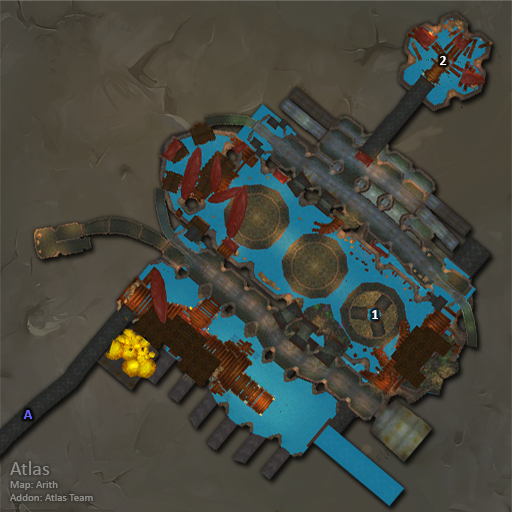
<style>
.page{position:relative;width:512px;height:512px}
.page>*{position:absolute;margin:0}
.t1{font:14px "Calibri-Bold";color:#ffffff}
.t2{font:14px "Calibri-Bold";color:#6666ff}
.t3{font:11px "Calibri";color:#91908d}
.t4{font:20px "Calibri";color:#91908d}
</style>
<div class="page">
<p class="t1" style="left:440px;top:56px;width:7px;height:9px">2</p>
<p class="t1" style="left:372px;top:310px;width:6px;height:9px">1</p>
<p class="t2" style="left:23px;top:410px;width:9px;height:9px">A</p>
<p class="t3" style="left:10px;top:461px;width:83px;height:40px"><span class="t4">Atlas<br></span>Map: Arith<br>Addon: Atlas Team</p>
</div>
